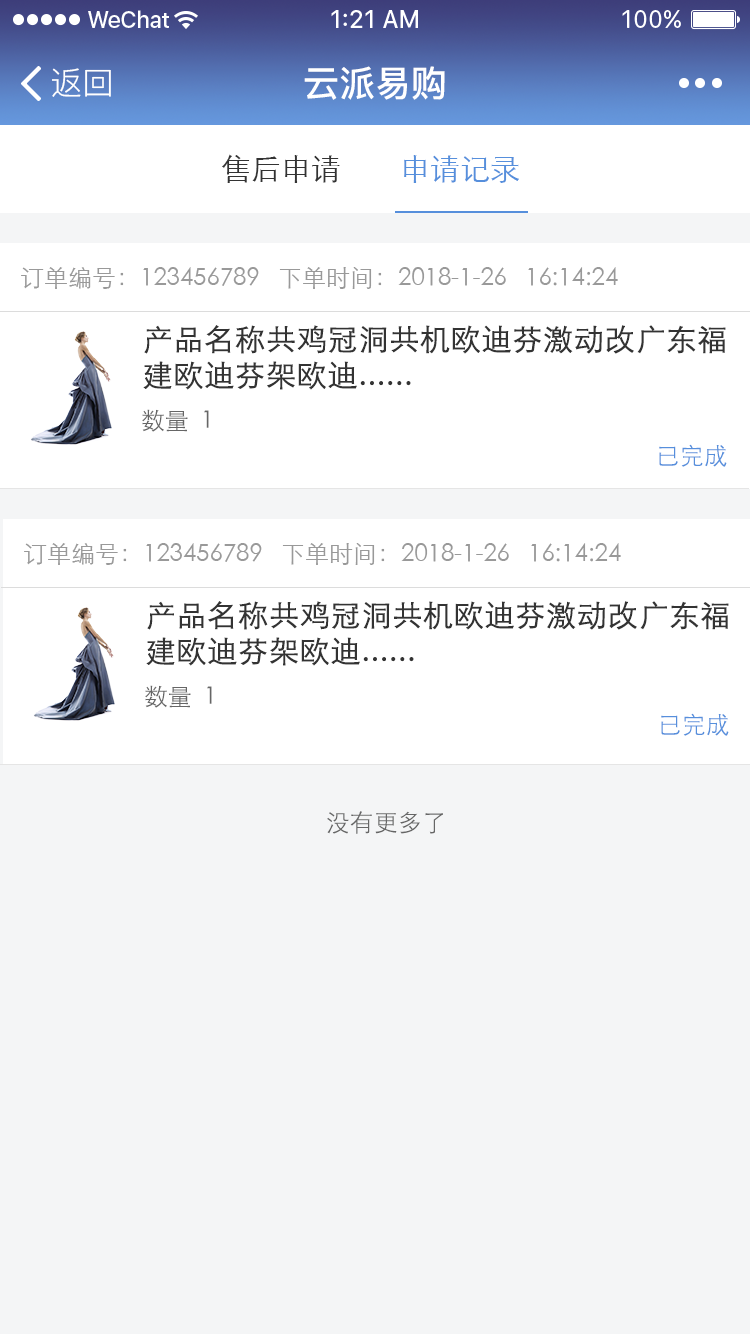
<style>
.page{position:relative;width:750px;height:1334px;background:#f4f5f6}
.page>*{position:absolute;margin:0}
.t1{font:32px "PingFang-SC-Regular";color:#ffffff}
.t2{font:36px "PingFang-SC-Bold";color:#ffffff}
.t3{font:30px "STXihei";color:#333333}
.t4{font:30px "STXihei";color:#568fdc}
.t5{font:24px "STXihei";color:#999999}
.t6{font:30px "STXihei";color:#333333;font-weight:bold}
.t7{font:24px "STXihei";color:#666666}
.t8{font:24px "STXihei";color:#568fdc}
</style>
<div class="page">
<p class="t1" style="left:52px;top:68px;width:59px;height:29px">返回</p>
<p class="t2" style="left:304px;top:66px;width:141px;height:34px">云派易购</p>
<p class="t3" style="left:222px;top:154px;width:118px;height:29px">售后申请</p>
<p class="t4" style="left:404px;top:155px;width:115px;height:28px">申请记录</p>
<p class="t5" style="left:21px;top:267px;width:238px;height:22px">订单编号：123456789</p>
<p class="t5" style="left:279px;top:267px;width:339px;height:22px">下单时间：2018-1-26   16:14:24</p>
<p class="t6" style="left:143px;top:325px;width:583px;height:65px">产品名称共鸡冠洞共机欧迪芬激动改广东福建欧迪芬架欧迪......</p>
<p class="t7" style="left:142px;top:409px;width:67px;height:23px">数量  1</p>
<p class="t8" style="left:659px;top:444px;width:68px;height:23px">已完成</p>
<p class="t5" style="left:24px;top:543px;width:238px;height:22px">订单编号：123456789</p>
<p class="t5" style="left:282px;top:543px;width:339px;height:22px">下单时间：2018-1-26   16:14:24</p>
<p class="t6" style="left:146px;top:601px;width:583px;height:65px">产品名称共鸡冠洞共机欧迪芬激动改广东福建欧迪芬架欧迪......</p>
<p class="t7" style="left:145px;top:685px;width:67px;height:23px">数量  1</p>
<p class="t8" style="left:661px;top:713px;width:68px;height:23px">已完成</p>
<p class="t7" style="left:327px;top:811px;width:116px;height:23px">没有更多了</p>
</div>
